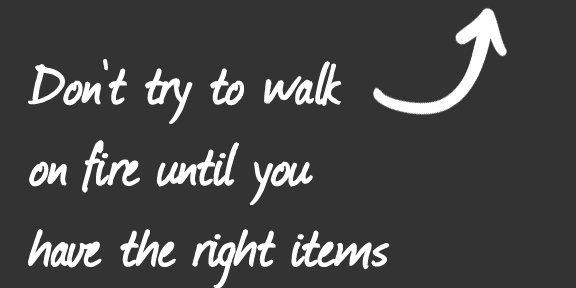
<style>
.page{position:relative;width:576px;height:288px;background:#333333}
.page>*{position:absolute;margin:0}
.t1{font:67.6px "Journal";color:#ffffff;font-weight:bold}
</style>
<div class="page">
<p class="t1" style="left:28px;top:59px;width:362px;height:230px">Don’t try to walk<br>on fire until you <br>have the right items</p>
</div>
